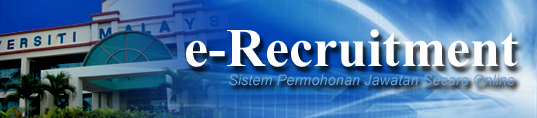
<style>
.page{position:relative;width:537px;height:118px}
.page>*{position:absolute;margin:0}
.t1{font:54.2px "TimesNewRomanPS-BoldMT";color:#fdfdfe}
.t2{font:14.6px "Arial-ItalicMT";color:#68a3df}
</style>
<div class="page">
<p class="t1" style="left:186px;top:29px;width:332px;height:38px">e-Recruitment</p>
<p class="t2" style="left:229px;top:74px;width:286px;height:12px">Sistem Permohonan Jawatan Secara Online</p>
</div>
